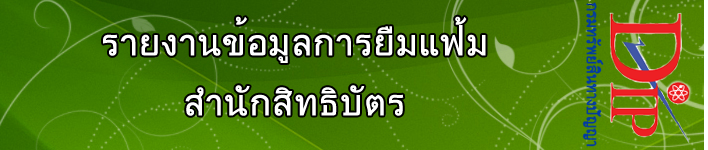
<style>
.page{position:relative;width:708px;height:150px}
.page>*{position:absolute;margin:0}
.t1{font:36px/60px "DokChampa";color:#ffffff;text-transform:uppercase;font-weight:bold}
</style>
<div class="page">
<p class="t1" style="left:103px;top:16px;width:383px;height:100px;text-align:center">รายงานข้อมูลการยืมแฟ้ม<br>สำนักสิทธิบัตร</p>
</div>
